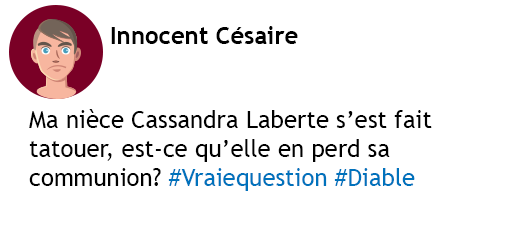
<style>
.page{position:relative;width:512px;height:241px;background:#ffffff}
.page>*{position:absolute;margin:0}
.t1{font:24px "TrebuchetMS-Bold";color:#000000}
.t2{font:24px "TrebuchetMS";color:#000000}
.t3{font:24px "TrebuchetMS";color:#0072bc}
</style>
<div class="page">
<p class="t1" style="left:111px;top:26px;width:187px;height:18px">Innocent Césaire</p>
<p class="t2" style="left:29px;top:109px;width:403px;height:82px">Ma nièce Cassandra Laberte s’est fait<br>tatouer, est-ce qu’elle en perd sa <br>communion? <span class="t3">#Vraiequestion #Diable</span></p>
</div>
